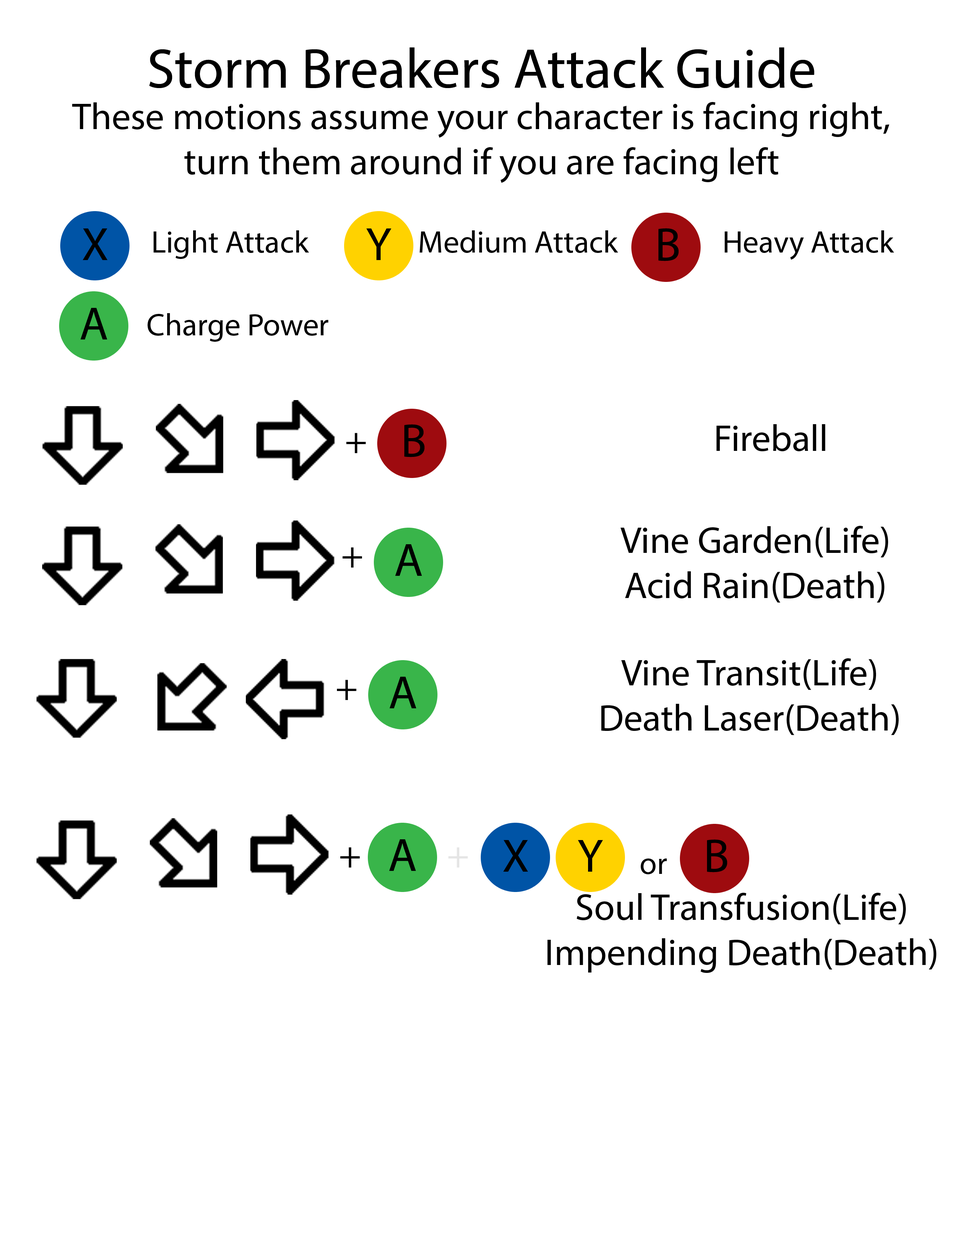
<style>
.page{position:relative;width:960px;height:1242px;background:#ffffff}
.page>*{position:absolute;margin:0}
.t1{font:56.5px "MyriadPro-Regular";color:#000000}
.t2{font:37.6px "MyriadPro-Regular";color:#000000}
.t3{font:47.1px "MyriadPro-Regular";color:#000000}
.t4{font:31.4px "MyriadPro-Regular";color:#000000}
.t5{font:37.6px "MyriadPro-Regular";color:#e5e5e5}
</style>
<div class="page">
<p class="t1" style="left:149px;top:47px;width:665px;height:41px">Storm Breakers Attack Guide</p>
<p class="t2" style="left:72px;top:102px;width:817px;height:81px;text-align:center">These motions assume your character is facing right, turn them around if you are facing left</p>
<p class="t3" style="left:83px;top:228px;width:25px;height:32px">X</p>
<p class="t4" style="left:154px;top:230px;width:155px;height:29px">Light Attack</p>
<p class="t3" style="left:366px;top:228px;width:25px;height:32px">Y</p>
<p class="t4" style="left:419px;top:230px;width:199px;height:23px">Medium Attack</p>
<p class="t3" style="left:658px;top:228px;width:21px;height:33px">B</p>
<p class="t4" style="left:725px;top:230px;width:169px;height:30px">Heavy Attack</p>
<p class="t3" style="left:81px;top:308px;width:26px;height:32px">A</p>
<p class="t4" style="left:148px;top:313px;width:180px;height:29px">Charge Power</p>
<p class="t3" style="left:404px;top:424px;width:21px;height:33px">B</p>
<p class="t2" style="left:716px;top:424px;width:109px;height:27px">Fireball</p>
<p class="t2" style="left:346px;top:433px;width:20px;height:20px">+</p>
<p class="t2" style="left:620px;top:526px;width:268px;height:77px;text-align:center">Vine Garden(Life)<br>Acid Rain(Death)</p>
<p class="t3" style="left:395px;top:544px;width:27px;height:32px">A</p>
<p class="t2" style="left:343px;top:547px;width:19px;height:21px">+</p>
<p class="t2" style="left:601px;top:658px;width:298px;height:77px;text-align:center">Vine Transit(Life)<br>Death Laser(Death)</p>
<p class="t3" style="left:390px;top:677px;width:26px;height:31px">A</p>
<p class="t2" style="left:337px;top:680px;width:19px;height:20px">+</p>
<p class="t3" style="left:389px;top:839px;width:27px;height:32px">A</p>
<p class="t3" style="left:503px;top:840px;width:25px;height:32px">X</p>
<p class="t3" style="left:578px;top:840px;width:25px;height:32px">Y</p>
<p class="t3" style="left:707px;top:839px;width:20px;height:34px">B</p>
<p class="t2" style="left:340px;top:847px;width:20px;height:21px">+</p>
<p class="t5" style="left:448px;top:847px;width:20px;height:21px">+</p>
<p class="t4" style="left:641px;top:859px;width:26px;height:15px">or</p>
<p class="t2" style="left:547px;top:893px;width:389px;height:80px;text-align:center">Soul Transfusion(Life)<br>Impending Death(Death)</p>
</div>
